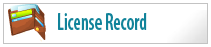
<style>
.page{position:relative;width:211px;height:47px;background:#ffffff}
.page>*{position:absolute;margin:0}
.t1{font:24px "MyriadPro-SemiboldCond";color:#11839a;scale:0.78 1}
</style>
<div class="page">
<p class="t1" style="left:58px;top:13px;width:89px;height:17px">License Record</p>
</div>
